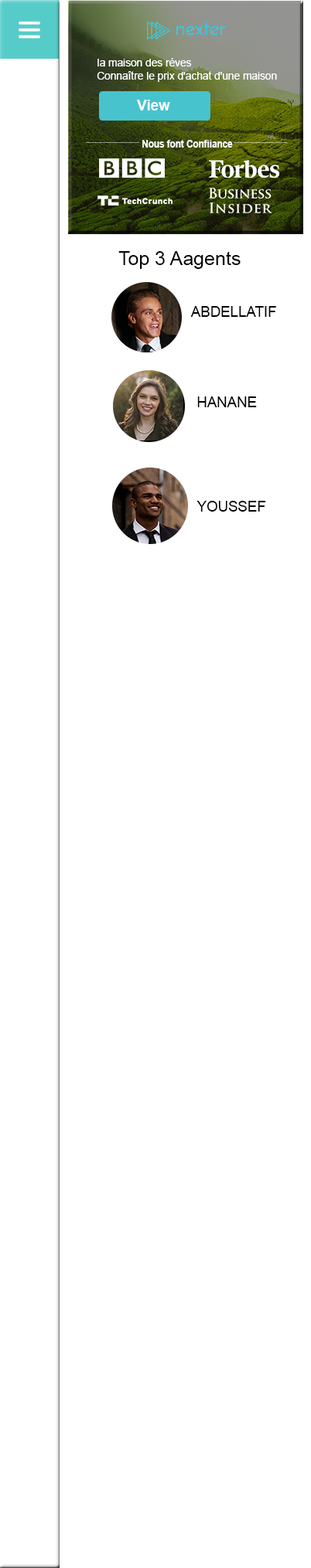
<style>
.page{position:relative;width:311px;height:1568px;background:#ffffff}
.page>*{position:absolute;margin:0}
.t1{font:10.7px "ArialMT";color:#ffffff}
.t2{font:14.5px "Arial-BoldMT";color:#ffffff}
.t3{font:10.7px "Arial-BoldMT";color:#fffdfd;scale:0.84 1}
.t4{font:19.3px "ArialMT";color:#000000}
.t5{font:14.4px "ArialMT";color:#000000}
</style>
<div class="page">
<p class="t1" style="left:97px;top:58px;width:95px;height:8px">la maison des réves</p>
<p class="t1" style="left:97px;top:71px;width:180px;height:11px">Connaître le prix d'achat d'une maison</p>
<p class="t2" style="left:137px;top:100px;width:33px;height:11px">View</p>
<p class="t3" style="left:142px;top:140px;width:91px;height:8px">Nous font Confiiance</p>
<p class="t4" style="left:118px;top:251px;width:122px;height:18px">Top 3 Aagents</p>
<p class="t5" style="left:190px;top:306px;width:86px;height:11px">ABDELLATIF</p>
<p class="t5" style="left:197px;top:396px;width:60px;height:11px">HANANE</p>
<p class="t5" style="left:196px;top:501px;width:70px;height:11px">YOUSSEF</p>
</div>
